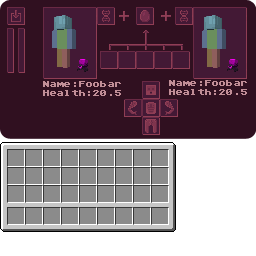
<style>
.page{position:relative;width:256px;height:256px;background:#301020}
.page>*{position:absolute;margin:0}
.t1{font:8px "AtariClassic-Regular";letter-spacing:-0.1em;color:#c18e97}
</style>
<div class="page">
<p class="t1" style="left:43px;top:81px;width:78px;height:15px;text-align:justify">Name:Foobar<br>Health:20.5</p>
<p class="t1" style="left:169px;top:80px;width:78px;height:15px;text-align:justify">Name:Foobar<br>Health:20.5</p>
</div>
